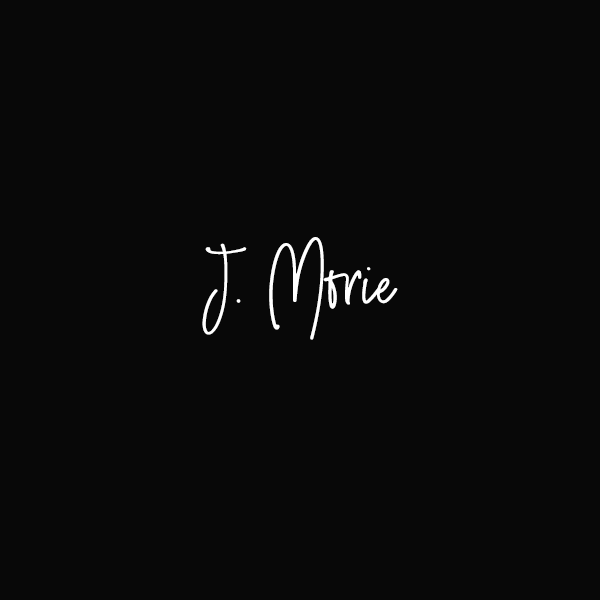
<style>
.page{position:relative;width:600px;height:600px;background:#080808}
.page>*{position:absolute;margin:0}
.t1{font:74.9px "SmoothStone-Regular";color:#ffffff}
</style>
<div class="page">
<p class="t1" style="left:202px;top:237px;width:196px;height:103px">J. Morie</p>
</div>
